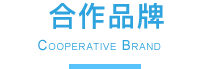
<style>
.page{position:relative;width:203px;height:69px;background:#ffffff}
.page>*{position:absolute;margin:0}
.t1{font:28px "PingFang-SC-Heavy";letter-spacing:0.05em;color:#2ea3de}
.t2{font:14px "ArialMT";letter-spacing:0.05em;color:#2ea3de;font-variant:small-caps}
.t3{font:14px "ArialMT";letter-spacing:0.05em;color:#2ea3de;text-transform:uppercase}
</style>
<div class="page">
<p class="t1" style="left:49px;top:2px;width:115px;height:28px">合作品牌</p>
<p class="t2" style="left:38px;top:39px;width:123px;height:12px"><span class="t3">c</span>ooperative <span class="t3">b</span>rand</p>
</div>
